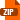
<style>
.page{position:relative;width:20px;height:20px;background:#ff6600}
.page>*{position:absolute;margin:0}
.t1{font:8px "Humanist777BT-BoldCondensedB";color:#ffffff;text-transform:uppercase}
</style>
<div class="page">
<p class="t1" style="left:3px;top:9px;width:11px;height:6px">zip</p>
</div>
